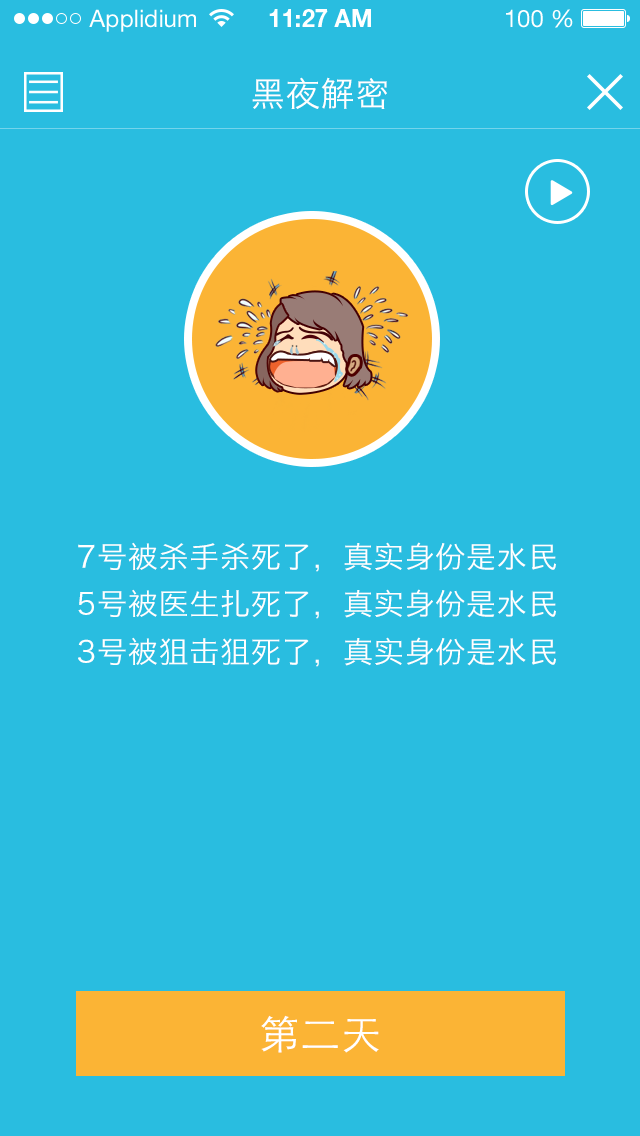
<style>
.page{position:relative;width:640px;height:1136px;background:#29bde0}
.page>*{position:absolute;margin:0}
.t1{font:34px "HiraginoSansGB-W3";letter-spacing:0.025em;color:#ffffff}
.t2{font:30px "HiraginoSansGB-W3";letter-spacing:0.025em;color:#ffffff}
.t3{font:40px "STHeitiSC-Light";letter-spacing:0.025em;color:#ffffff}
</style>
<div class="page">
<p class="t1" style="left:252px;top:77px;width:135px;height:32px">黑夜解密</p>
<p class="t2" style="left:78px;top:542px;width:478px;height:30px">7号被杀手杀死了，真实身份是水民</p>
<p class="t2" style="left:78px;top:589px;width:478px;height:30px">5号被医生扎死了，真实身份是水民</p>
<p class="t2" style="left:78px;top:637px;width:478px;height:30px">3号被狙击狙死了，真实身份是水民</p>
<p class="t3" style="left:261px;top:1015px;width:118px;height:38px">第二天</p>
</div>
